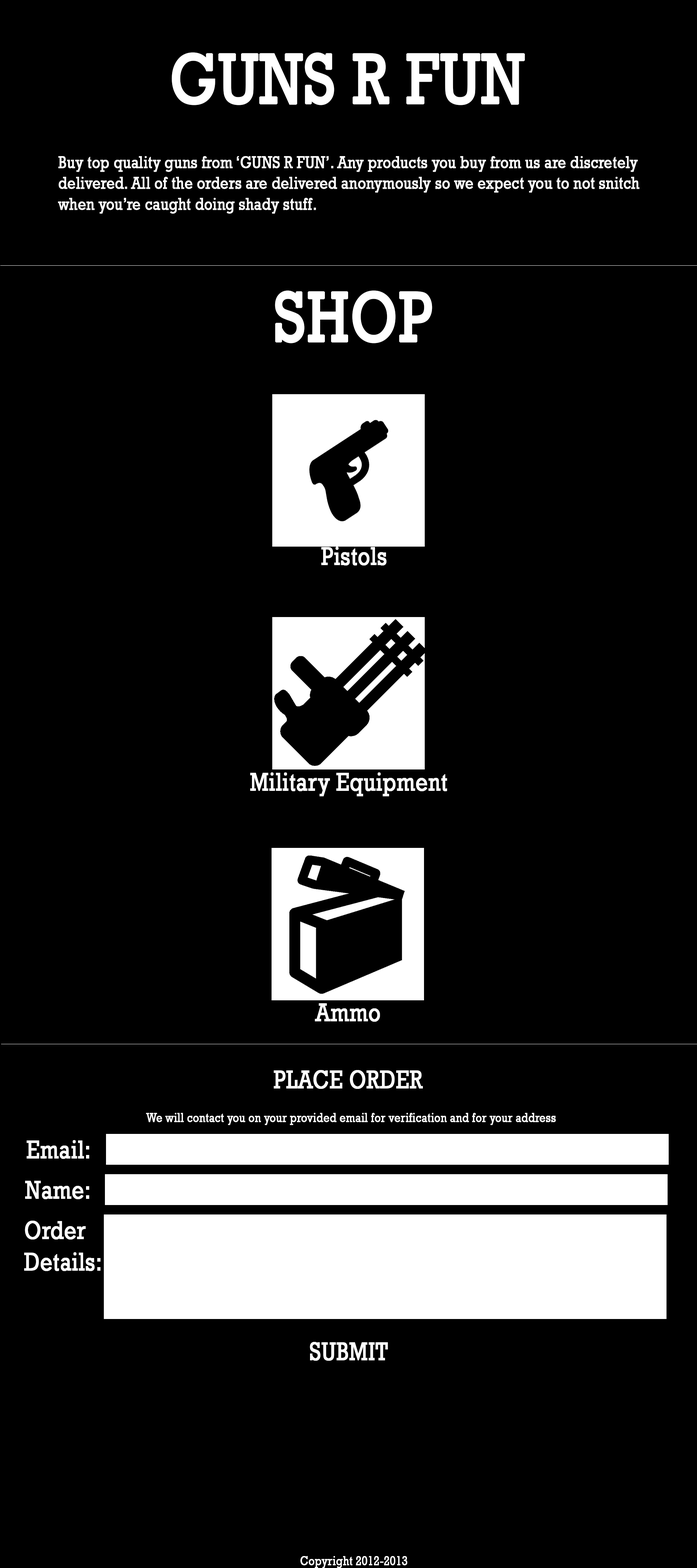
<style>
.page{position:relative;width:697px;height:1568px;background:#000000}
.page>*{position:absolute;margin:0}
.t1{font:72.6px "Rockwell";color:#ffffff;font-weight:bold;scale:0.81 1}
.t2{font:17.4px "Rockwell";color:#ffffff;font-weight:bold;scale:0.81 1}
.t3{font:26.1px "Rockwell";color:#ffffff;font-weight:bold;scale:0.81 1}
.t4{font:13.1px "Rockwell";color:#ffffff;font-weight:bold;scale:0.81 1}
</style>
<div class="page">
<p class="t1" style="left:172px;top:52px;width:353px;height:53px">GUNS R FUN</p>
<p class="t2" style="left:58px;top:156px;width:582px;height:58px">Buy top quality guns from ‘GUNS R FUN’. Any products you buy from us are discretely<br>delivered. All of the orders are delivered anonymously so we expect you to not snitch<br>when you’re caught doing shady stuff.</p>
<p class="t1" style="left:275px;top:290px;width:157px;height:53px">SHOP</p>
<p class="t3" style="left:321px;top:547px;width:66px;height:18px">Pistols</p>
<p class="t3" style="left:250px;top:772px;width:197px;height:24px">Military Equipment</p>
<p class="t3" style="left:315px;top:1003px;width:65px;height:19px">Ammo</p>
<p class="t3" style="left:274px;top:1070px;width:149px;height:19px">PLACE ORDER</p>
<p class="t4" style="left:146px;top:1113px;width:410px;height:12px">We will contact you on your provided email for verification and for your address</p>
<p class="t3" style="left:26px;top:1140px;width:63px;height:19px">Email:</p>
<p class="t3" style="left:25px;top:1181px;width:64px;height:18px">Name:</p>
<p class="t3" style="left:24px;top:1221px;width:77px;height:50px">Order <br>Details:</p>
<p class="t3" style="left:310px;top:1342px;width:78px;height:19px">SUBMIT</p>
<p class="t4" style="left:300px;top:1556px;width:107px;height:12px">Copyright 2012-2013</p>
</div>
